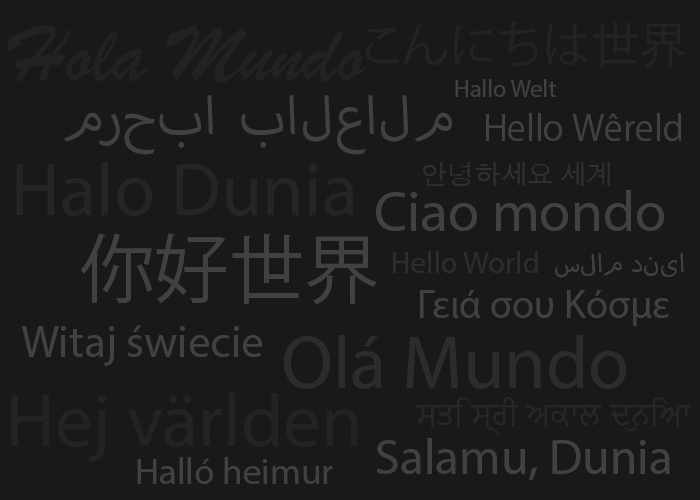
<style>
.page{position:relative;width:700px;height:500px;background:#19191a}
.page>*{position:absolute;margin:0}
.t1{font:84px "BrushScriptMT";color:#222223}
.t2{font:48.5px "KozGoPr6N-Regular";color:#232325}
.t3{font:24.3px "MyriadPro-Regular";color:#414144}
.t4{font:75px "MyriadArabic-Regular";color:#414144}
.t5{font:35px "KozGoPr6N-Regular";color:#414144}
.t6{font:75px "MyriadPro-Regular";color:#252527}
.t7{font:26.6px "AppleGothic";color:#303032}
.t8{font:57.4px "MyriadPro-Regular";color:#414144}
.t9{font:75px "KozGoPr6N-Regular";color:#414144}
.t10{font:30.9px "MyriadPro-Regular";color:#2d2d2f}
.t11{font:36.2px "MyriadArabic-Regular";color:#414144}
.t12{font:40.2px "MyriadPro-Regular";color:#414144}
.t13{font:45.1px "MyriadPro-Regular";color:#414144}
.t14{font:75px "MyriadPro-Regular";color:#2c2c2f}
.t15{font:75px "MyriadPro-Regular";color:#232325}
.t16{font:41.8px "AdobeGurmukhi-Regular";color:#272728}
.t17{font:49.9px "MyriadPro-Regular";color:#414144}
.t18{font:37px "MyriadPro-Regular";color:#414144}
</style>
<div class="page">
<p class="t1" style="left:7px;top:25px;width:358px;height:58px">Hola Mundo</p>
<p class="t2" style="left:366px;top:22px;width:320px;height:46px">こんにちは世界</p>
<p class="t3" style="left:455px;top:79px;width:101px;height:18px">Hallo Welt</p>
<p class="t4" style="left:63px;top:95px;width:389px;height:60px">مرحبا بالعالم</p>
<p class="t5" style="left:486px;top:113px;width:195px;height:28px">Hello Wêreld</p>
<p class="t6" style="left:16px;top:162px;width:338px;height:54px">Halo Dunia</p>
<p class="t7" style="left:423px;top:162px;width:187px;height:24px">안녕하세요 세계</p>
<p class="t8" style="left:376px;top:190px;width:288px;height:41px">Ciao mondo</p>
<p class="t9" style="left:81px;top:233px;width:296px;height:72px">你好世界</p>
<p class="t10" style="left:393px;top:251px;width:145px;height:22px">Hello World</p>
<p class="t11" style="left:555px;top:253px;width:129px;height:25px">سلام دنیا</p>
<p class="t12" style="left:420px;top:290px;width:249px;height:36px">Γειά σου Κόσμε</p>
<p class="t13" style="left:21px;top:325px;width:241px;height:41px">Witaj świecie</p>
<p class="t14" style="left:284px;top:335px;width:342px;height:54px">Olá Mundo</p>
<p class="t15" style="left:11px;top:393px;width:347px;height:69px">Hej världen</p>
<p class="t16" style="left:414px;top:397px;width:278px;height:39px">ਸਤਿ ਸ੍ਰੀ ਅਕਾਲ ਦੁਨਿਆ</p>
<p class="t17" style="left:376px;top:438px;width:294px;height:42px">Salamu, Dunia</p>
<p class="t18" style="left:137px;top:457px;width:196px;height:27px">Halló heimur</p>
</div>
